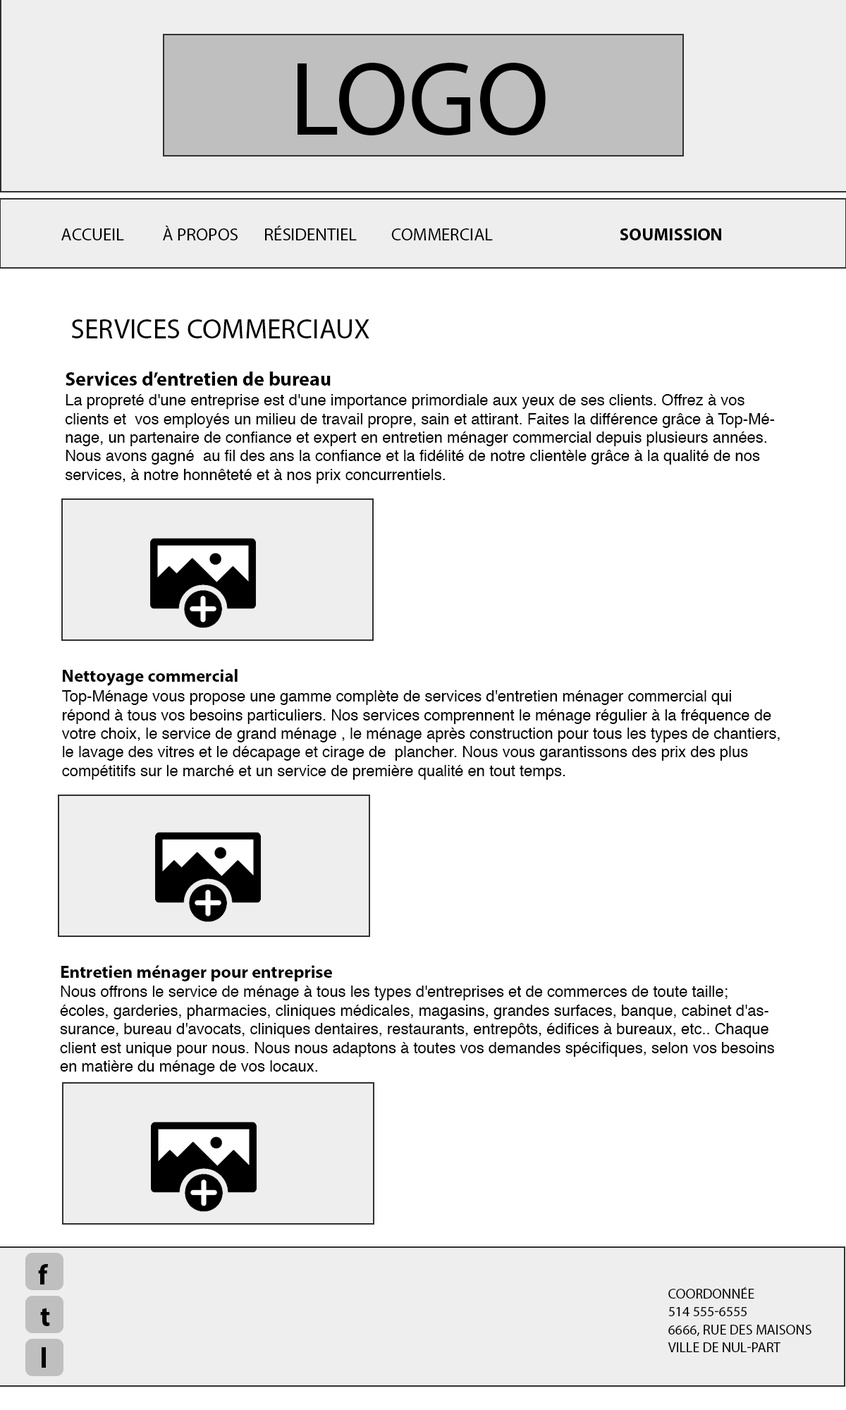
<style>
.page{position:relative;width:846px;height:1410px;background:#ffffff}
.page>*{position:absolute;margin:0}
.t1{font:105.7px "MyriadPro-Regular";color:#000000;text-transform:uppercase}
.t2{font:17.6px "MyriadPro-Regular";color:#000000;text-transform:uppercase}
.t3{font:17.6px "MyriadPro-Bold";color:#000000;text-transform:uppercase}
.t4{font:28.2px "MyriadPro-Regular";color:#000000;text-transform:uppercase}
.t5{font:15.5px "Helvetica";color:#000000}
.t6{font:19.7px/23.3px "MyriadPro-Bold";color:#000000}
.t7{font:17.6px "MyriadPro-Bold";color:#000000}
.t8{font:28.2px "MyriadPro-Bold";color:#000000}
.t9{font:14.1px "MyriadPro-Regular";color:#000000;text-transform:uppercase}
</style>
<div class="page">
<p class="t1" style="left:297px;top:62px;width:249px;height:74px">logo</p>
<p class="t2" style="left:61px;top:226px;width:660px;height:14px">accueil  à propos  résidentiel  commercial     <span class="t3">soumission</span></p>
<p class="t4" style="left:72px;top:319px;width:297px;height:19px">Services commerciAUX</p>
<p class="t5" style="left:65px;top:371px;width:710px;height:113px"><span class="t6">Services d’entretien de bureau<br></span>La propreté d'une entreprise est d'une importance primordiale aux yeux de ses clients. Offrez à vos clients et  vos employés un milieu de travail propre, sain et attirant. Faites la différence grâce à Top-Ménage, un partenaire de confiance et expert en entretien ménager commercial depuis plusieurs années. Nous avons gagné  au fil des ans la confiance et la fidélité de notre clientèle grâce à la qualité de nos services, à notre honnêteté et à nos prix concurrentiels.</p>
<p class="t5" style="left:62px;top:669px;width:718px;height:111px"><span class="t7">Nettoyage commercial</span><br>Top-Ménage vous propose une gamme complète de services d'entretien ménager commercial qui répond à tous vos besoins particuliers. Nos services comprennent le ménage régulier à la fréquence de votre choix, le service de grand ménage , le ménage après construction pour tous les types de chantiers, le lavage des vitres et le décapage et cirage de  plancher. Nous vous garantissons des prix des plus compétitifs sur le marché et un service de première qualité en tout temps.</p>
<p class="t5" style="left:60px;top:965px;width:714px;height:110px"><span class="t7">Entretien ménager pour entreprise<br></span>Nous offrons le service de ménage à tous les types d'entreprises et de commerces de toute taille; écoles, garderies, pharmacies, cliniques médicales, magasins, grandes surfaces, banque, cabinet d'assurance, bureau d'avocats, cliniques dentaires, restaurants, entrepôts, édifices à bureaux, etc.. Chaque client est unique pour nous. Nous nous adaptons à toutes vos demandes spécifiques, selon vos besoins en matière du ménage de vos locaux.</p>
<p class="t8" style="left:38px;top:1264px;width:10px;height:20px">f</p>
<p class="t9" style="left:668px;top:1286px;width:143px;height:66px">coordonnée<br>514 555-6555<br>6666, rUE DES MAISONS<br>VILLE DE NUL-PART</p>
<p class="t8" style="left:40px;top:1308px;width:10px;height:18px">t</p>
</div>
